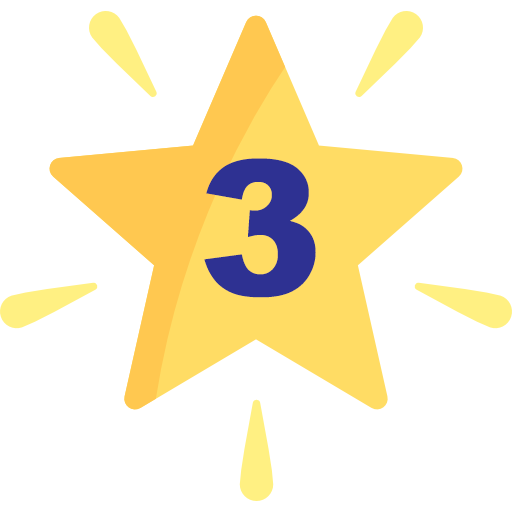
<style>
.page{position:relative;width:512px;height:512px;background:#ffffff}
.page>*{position:absolute;margin:0}
.t1{font:187.5px "Arial-Black";color:#2e3192}
</style>
<div class="page">
<p class="t1" style="left:204px;top:158px;width:112px;height:140px">3</p>
</div>
